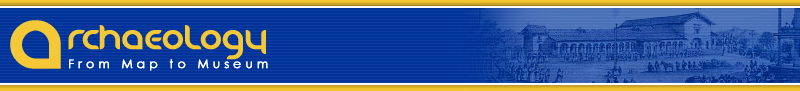
<style>
.page{position:relative;width:800px;height:91px;background:#003399}
.page>*{position:absolute;margin:0}
.t1{font:60px "Danube";letter-spacing:0.025em;color:#f4c836;font-weight:bold}
.t2{font:24px "Danube";letter-spacing:0.025em;color:#f4c836;font-weight:bold}
.t3{font:12px "CenturyGothic";letter-spacing:0.33em;color:#ffffff;font-weight:bold}
</style>
<div class="page">
<p class="t1" style="left:10px;top:20px;width:51px;height:49px">A</p>
<p class="t2" style="left:68px;top:25px;width:198px;height:35px">rchaeology</p>
<p class="t3" style="left:69px;top:59px;width:199px;height:12px">From Map to Museum</p>
</div>
